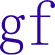
<style>
.page{position:relative;width:55px;height:55px;background:#ffffff}
.page>*{position:absolute;margin:0}
.t1{font:66.7px "SimSun-ExtB";color:#2d0497;scale:0.9 1}
</style>
<div class="page">
<p class="t1" style="left:0px;top:0px;width:55px;height:55px">gf</p>
</div>
